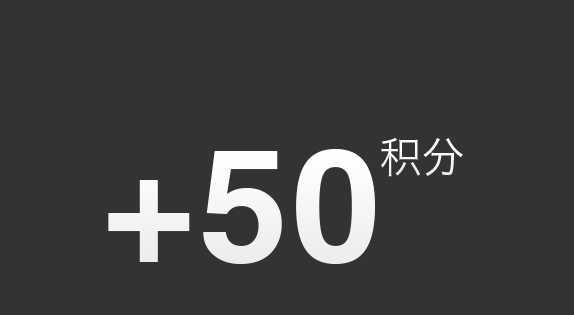
<style>
.page{position:relative;width:574px;height:315px;background:#333333}
.page>*{position:absolute;margin:0}
.t1{font:42px "HiraginoSansGB-W3";letter-spacing:0.02em;color:#ffffff}
.t2{font:159.5px "CTCuHeiSJ";letter-spacing:0.02em;color:#ffffff}
</style>
<div class="page">
<p class="t1" style="left:381px;top:137px;width:82px;height:40px">积分</p>
<p class="t2" style="left:108px;top:149px;width:267px;height:115px">+50</p>
</div>
